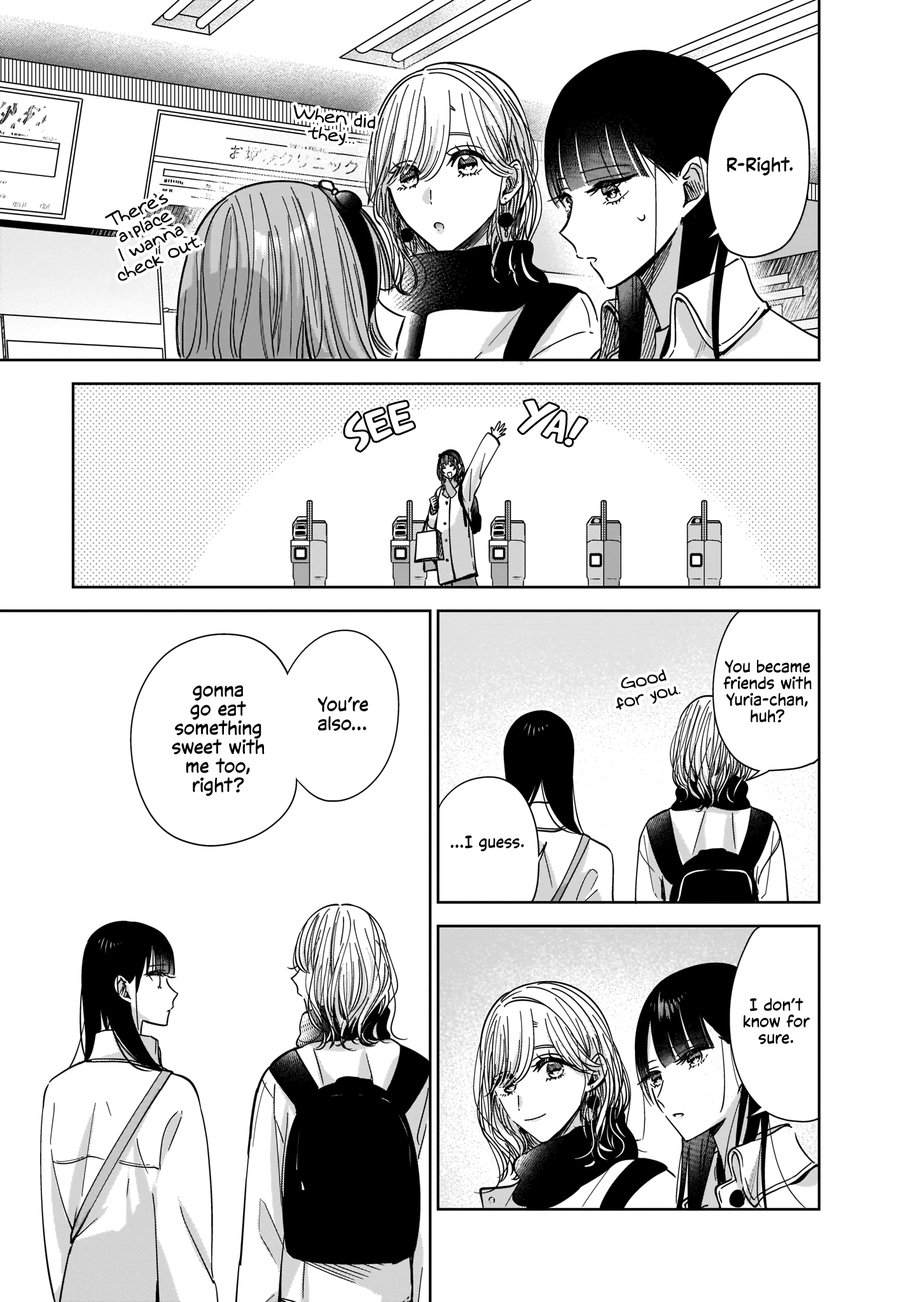
<style>
.page{position:relative;width:916px;height:1302px;background:#ffffff}
.page>*{position:absolute;margin:0}
.t1{font:17.8px "Augie";color:#000000}
.t2{font:17.8px "Augie";letter-spacing:0.06em;color:#000000}
.t3{font:19.1px "CCVictorySpeechLower-Regular";color:#000000}
.t4{font:16.5px "CCVictorySpeechLower-Regular";color:#000000}
.t5{font:16.5px "Augie";color:#000000}
</style>
<div class="page">
<p class="t1" style="left:293px;top:105px;width:82px;height:41px;text-align:center;rotate:7deg">When did<br>they<span class="t2">...</span></p>
<p class="t3" style="left:727px;top:156px;width:65px;height:20px">R-Right.</p>
<p class="t1" style="left:104px;top:193px;width:98px;height:88px;text-align:center;rotate:-24deg">There’s<br>a place<br>I wanna<br>check out.</p>
<p class="t4" style="left:723px;top:659px;width:88px;height:64px;text-align:center">You became<br>friends with<br>Yuria-chan,<br>huh?</p>
<p class="t5" style="left:616px;top:670px;width:64px;height:40px;text-align:center;rotate:-14deg">Good<br>for you.</p>
<p class="t3" style="left:172px;top:685px;width:93px;height:111px;text-align:center">gonna<br>go eat<br>something<br>sweet with<br>me too,<br>right?</p>
<p class="t3" style="left:317px;top:696px;width:51px;height:35px;text-align:center">You’re<br>also...</p>
<p class="t4" style="left:450px;top:836px;width:74px;height:15px">...I guess.</p>
<p class="t4" style="left:743px;top:998px;width:66px;height:47px;text-align:center">I don’t<br>know for<br>sure.</p>
</div>
